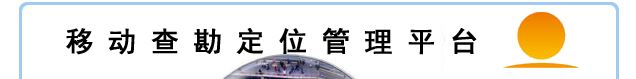
<style>
.page{position:relative;width:636px;height:79px;background:#ffffff}
.page>*{position:absolute;margin:0}
.t1{font:48px "SimHei";letter-spacing:0.5em;color:#000000;font-weight:bold}
</style>
<div class="page">
<p class="t1" style="left:66px;top:27px;width:411px;height:28px">移动查勘定位管理平台</p>
</div>
